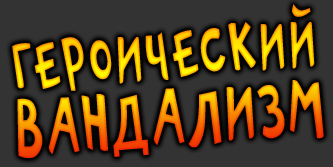
<style>
.page{position:relative;width:333px;height:167px;background:#333333}
.page>*{position:absolute;margin:0}
.t1{font:94.3px "PFPlayskoolPro-Regular";letter-spacing:0.04em;text-transform:uppercase;scale:0.69 1}
.t2{font:108.1px "PFPlayskoolPro-Regular";letter-spacing:0.03em;text-transform:uppercase;scale:0.69 1}
</style>
<div class="page">
<p class="t1" style="left:12px;top:4px;width:303px;height:87px;rotate:-5deg">героический</p>
<p class="t2" style="left:17px;top:80px;width:307px;height:78px;rotate:-5deg">вандализм</p>
</div>
